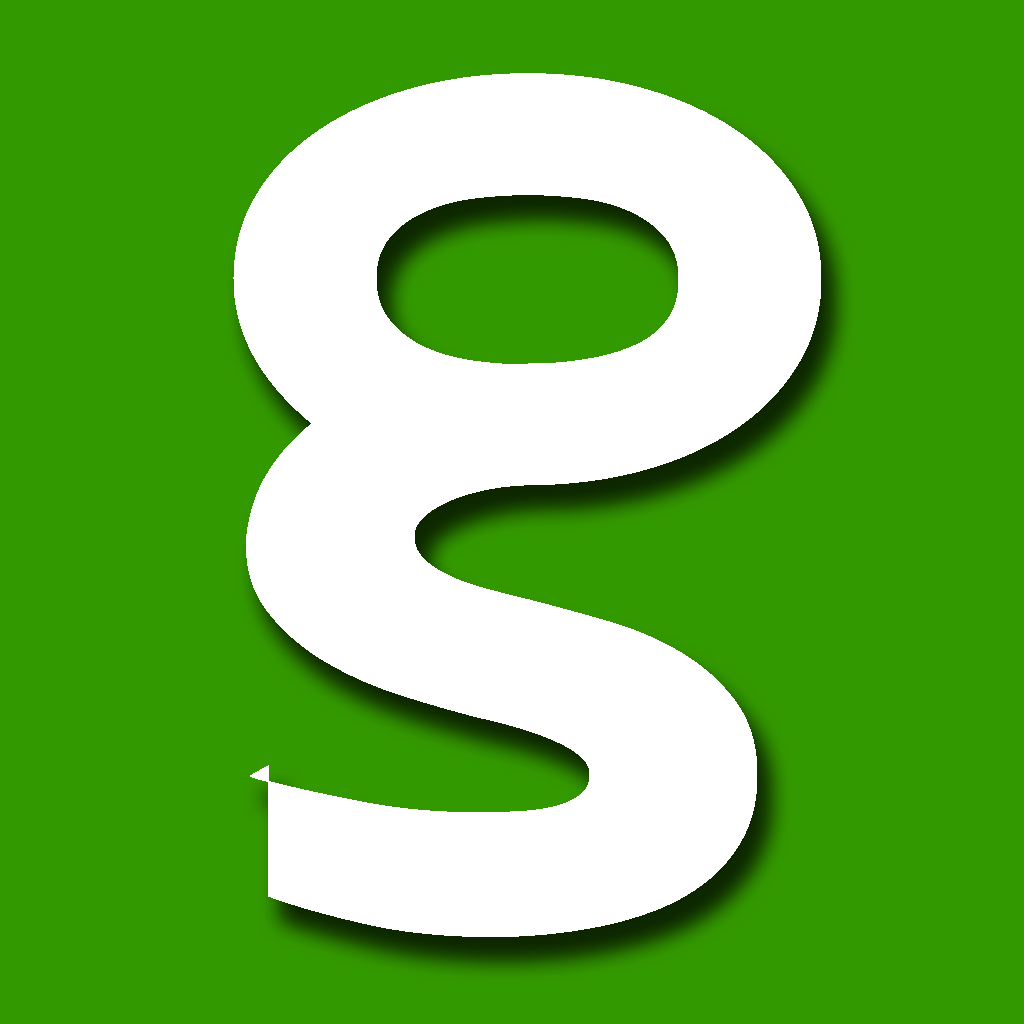
<style>
.page{position:relative;width:1024px;height:1024px;background:#339900}
.page>*{position:absolute;margin:0}
.t1{font:1154.9px "newdreamers";color:#ffffff}
</style>
<div class="page">
<p class="t1" style="left:233px;top:73px;width:588px;height:864px">g</p>
</div>
